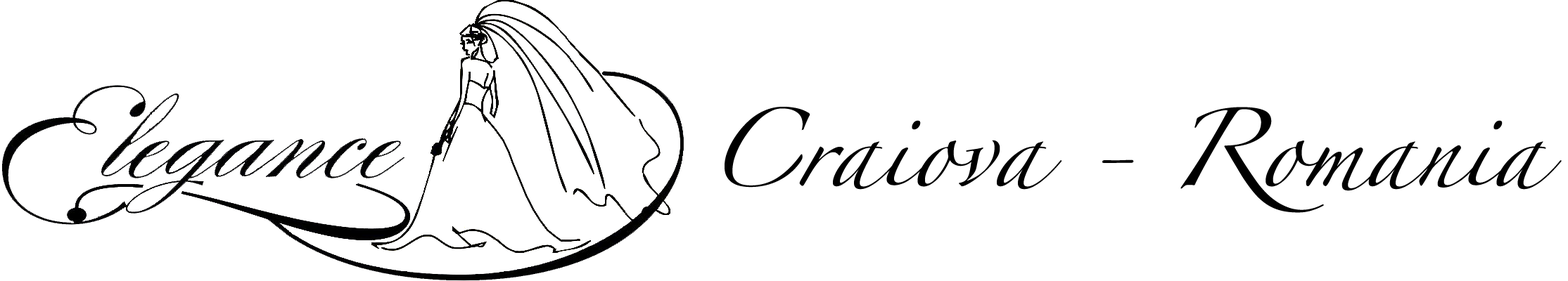
<style>
.page{position:relative;width:1568px;height:281px;background:#ffffff}
.page>*{position:absolute;margin:0}
.t1{font:70.3px "Zapfino";color:#000000}
</style>
<div class="page">
<p class="t1" style="left:725px;top:107px;width:837px;height:106px">Craiova - Romania</p>
</div>
